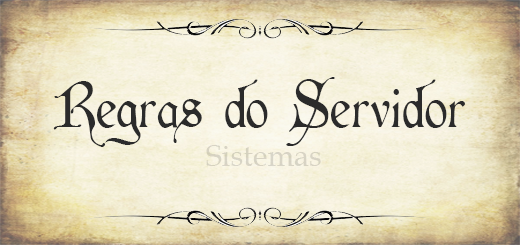
<style>
.page{position:relative;width:520px;height:245px}
.page>*{position:absolute;margin:0}
.t1{font:60px "Cardinal-Alternate";color:#2b2b2b}
.t2{font:30px "BookAntiqua";color:#d8d3c5}
</style>
<div class="page">
<p class="t1" style="left:53px;top:77px;width:412px;height:70px">Regras do Servidor</p>
<p class="t2" style="left:206px;top:145px;width:115px;height:21px">Sistemas</p>
</div>
